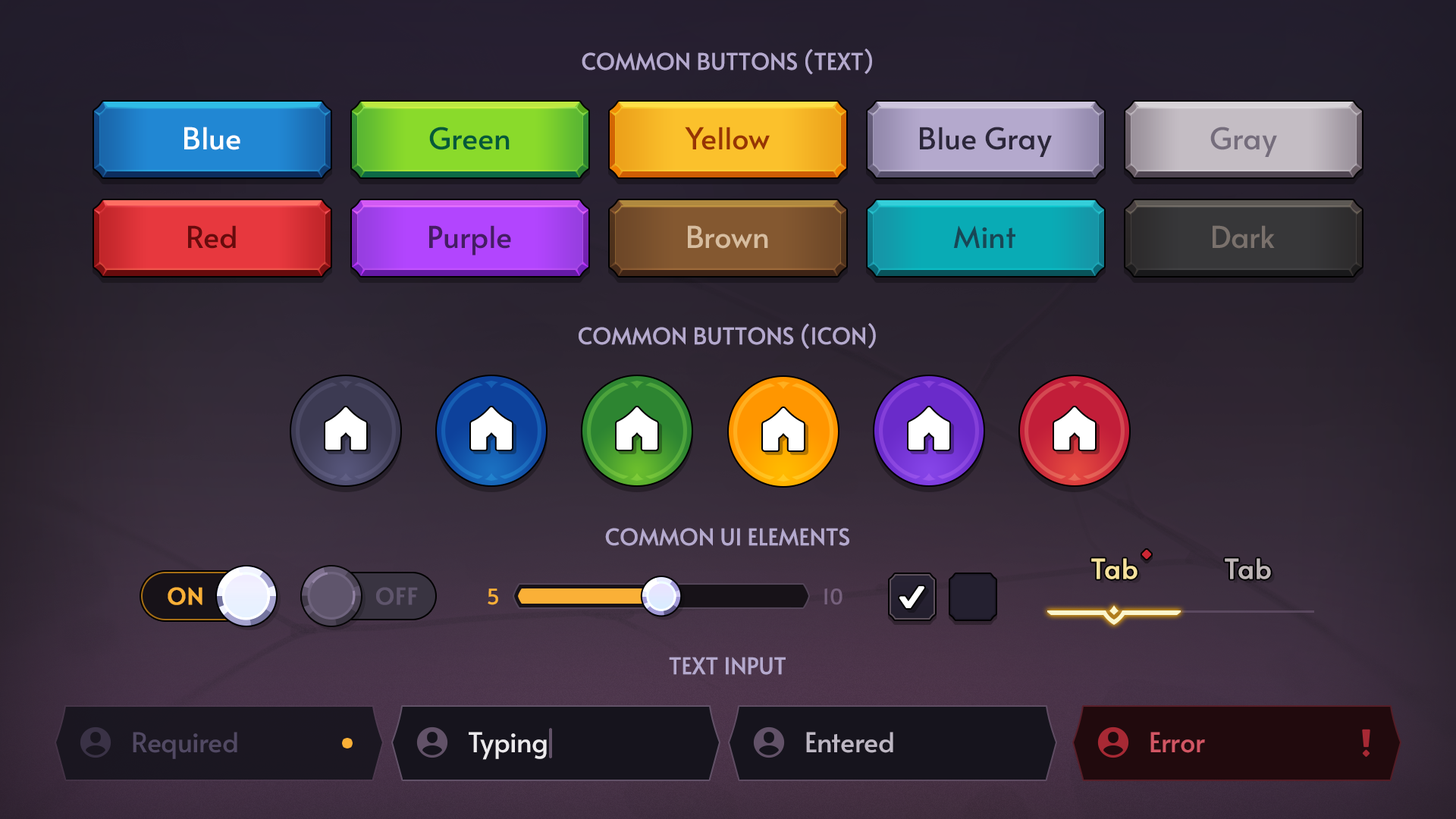
<style>
.page{position:relative;width:1456px;height:819px}
.page>*{position:absolute;margin:0}
.t1{font:22.7px "Alata-Regular";color:#b4a9cd;text-transform:uppercase}
.t2{font:30.3px "Alata-Regular";color:#ffffff}
.t3{font:30.3px "Alata-Regular";color:#045a39}
.t4{font:30.3px "Alata-Regular";color:#973504}
.t5{font:30.3px "Alata-Regular";color:#2c273a}
.t6{font:30.3px "Alata-Regular";color:#756d7c}
.t7{font:30.3px "Alata-Regular";color:#680b0c}
.t8{font:30.3px "Alata-Regular";color:#451d64}
.t9{font:30.3px "Alata-Regular";color:#d7bd9f}
.t10{font:30.3px "Alata-Regular";color:#184755}
.t11{font:30.3px "Alata-Regular";color:#7a716c}
.t12{font:27.3px "Alata-Regular";color:#f6e19c;font-weight:bold}
.t13{font:27.3px "Alata-Regular";color:#beb5b6;font-weight:bold}
.t14{font:22.7px "Alata-Regular";color:#fab037;text-transform:uppercase;font-weight:bold}
.t15{font:22.7px "Alata-Regular";color:#5f556c;text-transform:uppercase;font-weight:bold}
.t16{font:21.2px "Alata-Regular";color:#fab037}
.t17{font:21.2px "Alata-Regular";color:#76617d}
.t18{font:27.3px "Alata-Regular";color:#514963}
.t19{font:27.3px "Alata-Regular";color:#eceaed}
.t20{font:27.3px "Alata-Regular";color:#bdb7c3}
.t21{font:27.3px "Alata-Regular";color:#d25664}
</style>
<div class="page">
<p class="t1" style="left:582px;top:49px;width:290px;height:25px">Common Buttons (Text)</p>
<p class="t2" style="left:184px;top:127px;width:56px;height:23px">Blue</p>
<p class="t3" style="left:429px;top:127px;width:81px;height:23px">Green</p>
<p class="t4" style="left:685px;top:127px;width:85px;height:23px">Yellow</p>
<p class="t5" style="left:920px;top:127px;width:132px;height:30px">Blue Gray</p>
<p class="t6" style="left:1210px;top:127px;width:67px;height:30px">Gray</p>
<p class="t7" style="left:188px;top:225px;width:48px;height:24px">Red</p>
<p class="t8" style="left:429px;top:225px;width:82px;height:31px">Purple</p>
<p class="t9" style="left:688px;top:225px;width:80px;height:24px">Brown</p>
<p class="t10" style="left:953px;top:225px;width:62px;height:23px">Mint</p>
<p class="t11" style="left:1213px;top:225px;width:62px;height:24px">Dark</p>
<p class="t1" style="left:579px;top:323px;width:297px;height:26px">Common Buttons (Icon)</p>
<p class="t1" style="left:605px;top:528px;width:244px;height:18px">Common UI Elements</p>
<p class="t12" style="left:1091px;top:558px;width:46px;height:21px">Tab</p>
<p class="t13" style="left:1225px;top:558px;width:46px;height:21px">Tab</p>
<p class="t14" style="left:168px;top:587px;width:34px;height:18px">on</p>
<p class="t15" style="left:376px;top:587px;width:42px;height:18px">off</p>
<p class="t16" style="left:488px;top:588px;width:10px;height:17px">5</p>
<p class="t17" style="left:824px;top:588px;width:18px;height:17px">10</p>
<p class="t1" style="left:669px;top:657px;width:117px;height:18px">Text input</p>
<p class="t18" style="left:133px;top:732px;width:104px;height:27px">Required</p>
<p class="t19" style="left:469px;top:732px;width:78px;height:28px">Typing</p>
<p class="t20" style="left:806px;top:732px;width:87px;height:21px">Entered</p>
<p class="t21" style="left:1150px;top:732px;width:55px;height:21px">Error</p>
</div>
